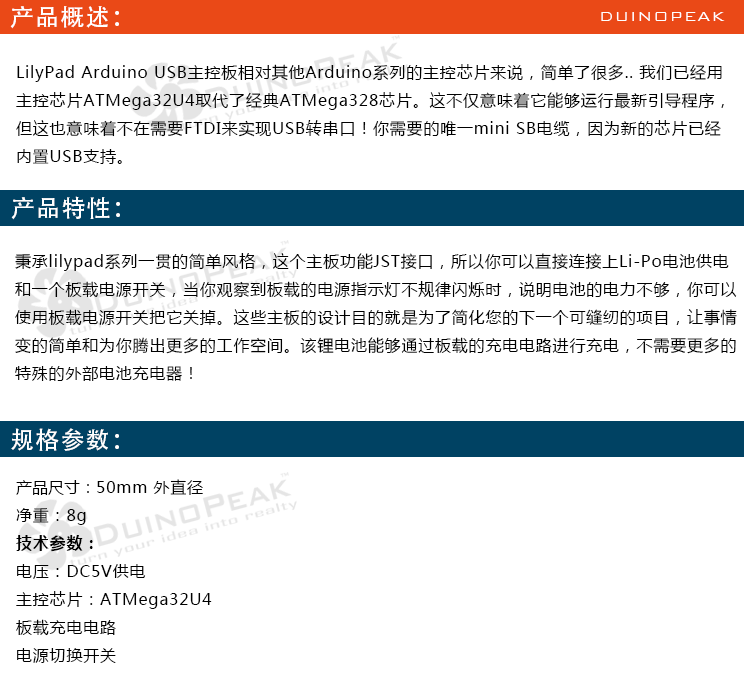
<style>
.page{position:relative;width:744px;height:680px;background:#ffffff}
.page>*{position:absolute;margin:0}
.t1{font:24px "AdobeHeitiStd-Regular";letter-spacing:0.05em;color:#ffffff}
.t2{font:18px "BankGothicBT-Light";letter-spacing:0.05em;color:#ffffff}
.t3{font:16px "MicrosoftYaHei";letter-spacing:0.05em;color:#000000}
.t4{font:16px "MicrosoftYaHei";color:#000000}
.t5{font:16px "MicrosoftYaHei-Bold";letter-spacing:0.05em;color:#000000}
</style>
<div class="page">
<p class="t1" style="left:10px;top:6px;width:109px;height:23px">产品概述：</p>
<p class="t2" style="left:601px;top:12px;width:124px;height:9px">DUINOPEAK</p>
<p class="t3" style="left:16px;top:64px;width:708px;height:100px">LilyPad Arduino USB主控板相对其他Arduino系列的主控芯片来说，简单了很多.. 我们已经用<br>主控芯片ATMega32U4取代了经典ATMega328芯片。这不仅意味着它能够运行最新引导程序，<br>但这也意味着不在需要FTDI来实现USB转串口！你需要的唯一mini SB电缆，因为新的芯片已经<br>内置USB支持。</p>
<p class="t1" style="left:11px;top:196px;width:109px;height:24px">产品特性：</p>
<p class="t3" style="left:15px;top:253px;width:722px;height:128px">秉承lilypad系列一贯的简单风格，这个主板功能JST接口，所以你可以直接连接上Li-Po电池供电<br>和一个板载电源开关，当你观察到板载的电源指示灯不规律闪烁时，说明电池的电力不够，你可以<br>使用板载电源开关把它关掉。这些主板的设计目的就是为了简化您的下一个可缝纫的项目，让事情<br>变的简单和为你腾出更多的工作空间。该锂电池能够通过板载的充电电路进行充电，不需要更多的<br>特殊的外部电池充电器！</p>
<p class="t1" style="left:11px;top:428px;width:108px;height:23px">规格参数：</p>
<p class="t3" style="left:16px;top:479px;width:196px;height:184px"><span class="t4">产品尺寸：</span>50mm 外直径<br>净重：8g<br><span class="t5">技术参数：<br></span>电压：DC5V供电<br>主控芯片：ATMega32U4<br>板载充电电路<br>电源切换开关</p>
</div>
